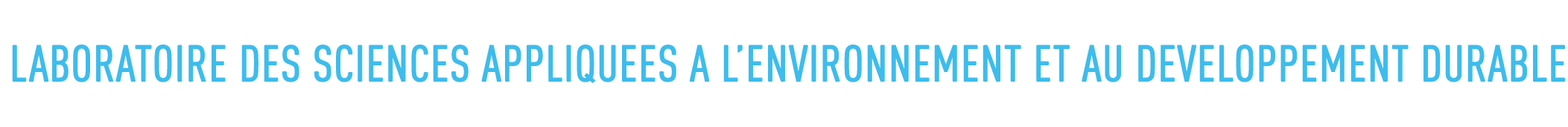
<style>
.page{position:relative;width:1568px;height:127px;background:#ffffff}
.page>*{position:absolute;margin:0}
.t1{font:49.7px "DINCond-Regular";color:#3ebcec;font-weight:bold}
</style>
<div class="page">
<p class="t1" style="left:12px;top:45px;width:1553px;height:38px">LABORATOIRE DES SCIENCES APPLIQUEES A L’ENVIRONNEMENT ET AU DEVELOPPEMENT DURABLE</p>
</div>
